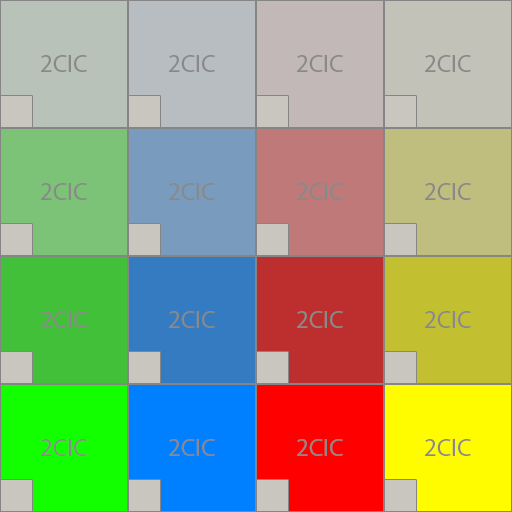
<style>
.page{position:relative;width:512px;height:512px}
.page>*{position:absolute;margin:0}
.t1{font:25px "MyriadPro-Regular";color:#898989}
</style>
<div class="page">
<p class="t1" style="left:41px;top:55px;width:46px;height:17px">2CIC</p>
<p class="t1" style="left:169px;top:55px;width:46px;height:17px">2CIC</p>
<p class="t1" style="left:297px;top:55px;width:46px;height:17px">2CIC</p>
<p class="t1" style="left:425px;top:55px;width:46px;height:17px">2CIC</p>
<p class="t1" style="left:41px;top:183px;width:46px;height:17px">2CIC</p>
<p class="t1" style="left:169px;top:183px;width:46px;height:17px">2CIC</p>
<p class="t1" style="left:297px;top:183px;width:46px;height:17px">2CIC</p>
<p class="t1" style="left:425px;top:183px;width:46px;height:17px">2CIC</p>
<p class="t1" style="left:41px;top:311px;width:46px;height:17px">2CIC</p>
<p class="t1" style="left:169px;top:311px;width:46px;height:17px">2CIC</p>
<p class="t1" style="left:297px;top:311px;width:46px;height:17px">2CIC</p>
<p class="t1" style="left:425px;top:311px;width:46px;height:17px">2CIC</p>
<p class="t1" style="left:41px;top:439px;width:46px;height:17px">2CIC</p>
<p class="t1" style="left:169px;top:439px;width:46px;height:17px">2CIC</p>
<p class="t1" style="left:297px;top:439px;width:46px;height:17px">2CIC</p>
<p class="t1" style="left:425px;top:439px;width:46px;height:17px">2CIC</p>
</div>
